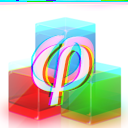
<style>
.page{position:relative;width:128px;height:128px;background:#ffffff}
.page>*{position:absolute;margin:0}
.t1{font:100px "YouYuan";font-weight:bold}
</style>
<div class="page">
<p class="t1" style="left:33px;top:33px;width:57px;height:63px">φ</p>
<p class="t1" style="left:36px;top:33px;width:57px;height:63px">φ</p>
<p class="t1" style="left:38px;top:33px;width:57px;height:63px">φ</p>
</div>
